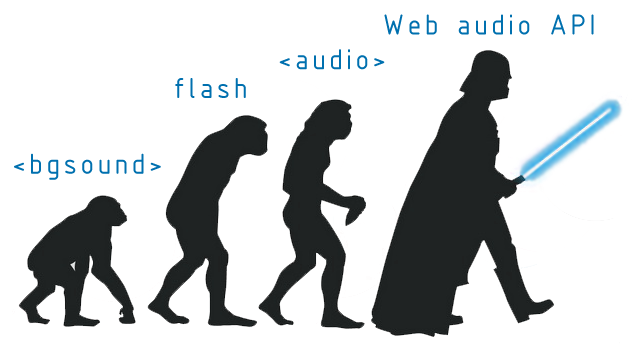
<style>
.page{position:relative;width:633px;height:358px;background:#ffffff}
.page>*{position:absolute;margin:0}
.t1{font:31px "ISOCPEUR";letter-spacing:0.1em;color:#0070af}
</style>
<div class="page">
<p class="t1" style="left:384px;top:14px;width:210px;height:21px">Web audio API</p>
<p class="t1" style="left:279px;top:49px;width:106px;height:21px">&lt;audio&gt;</p>
<p class="t1" style="left:175px;top:78px;width:71px;height:20px">flash</p>
<p class="t1" style="left:14px;top:153px;width:147px;height:27px">&lt;bgsound&gt;</p>
</div>
